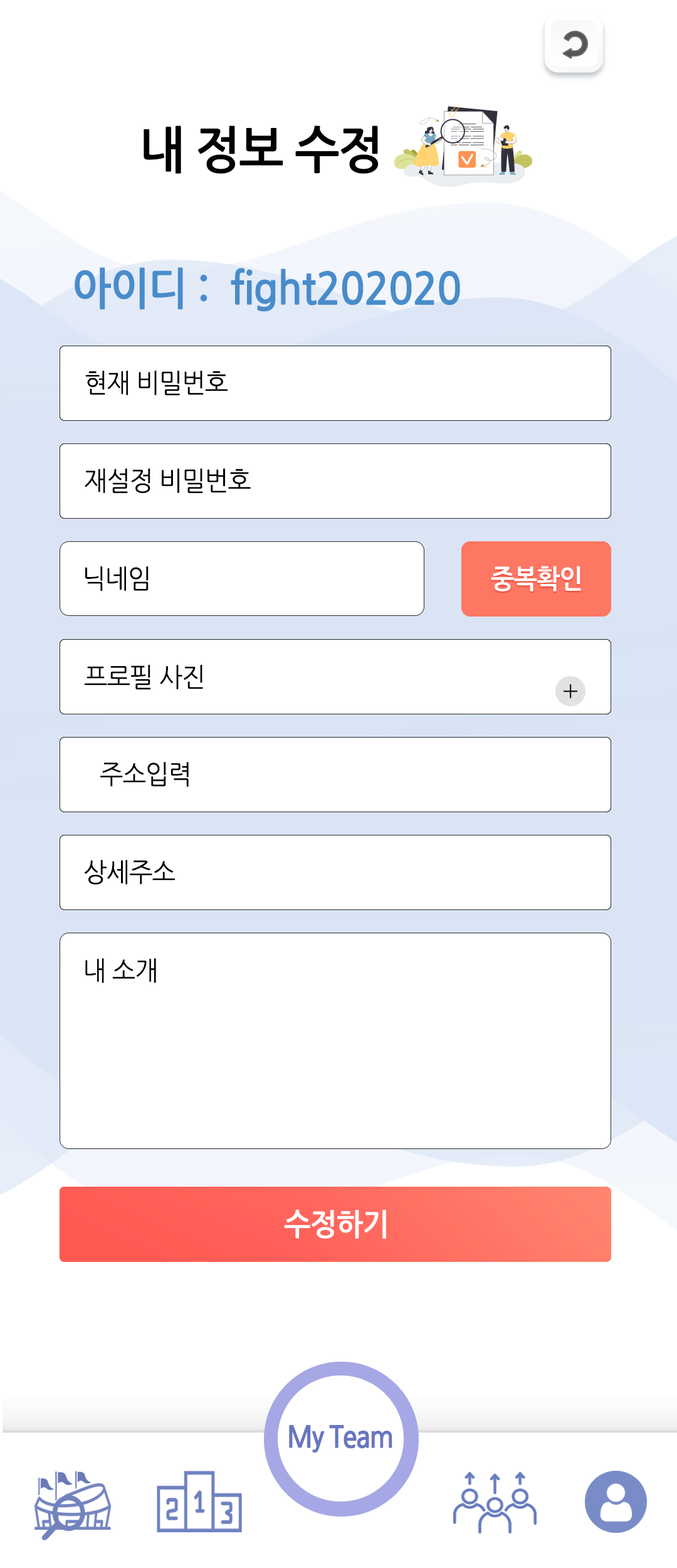
<style>
.page{position:relative;width:677px;height:1568px;background:#ffffff}
.page>*{position:absolute;margin:0}
.t1{font:50.2px "NanumGothicBold";letter-spacing:-0.025em;color:#000000;scale:0.95 1}
.t2{font:43.9px "NanumGothicBold";letter-spacing:-0.025em;color:#488ccb;scale:0.95 1}
.t3{font:26.3px "NanumGothic";letter-spacing:-0.025em;color:#000000;scale:0.95 1}
.t4{font:26.3px "NanumGothicBold";letter-spacing:-0.025em;color:#ffffff;scale:0.95 1}
.t5{font:30.1px "NanumGothicBold";letter-spacing:-0.025em;color:#ffffff;scale:0.95 1}
</style>
<div class="page">
<p class="t1" style="left:144px;top:125px;width:234px;height:49px">내 정보 수정</p>
<p class="t2" style="left:75px;top:267px;width:385px;height:45px">아이디 :  fight202020</p>
<p class="t3" style="left:85px;top:371px;width:143px;height:25px">현재 비밀번호</p>
<p class="t3" style="left:85px;top:469px;width:166px;height:25px">재설정 비밀번호</p>
<p class="t3" style="left:85px;top:566px;width:64px;height:25px">닉네임</p>
<p class="t4" style="left:491px;top:566px;width:90px;height:25px">중복확인</p>
<p class="t3" style="left:85px;top:665px;width:118px;height:25px">프로필 사진</p>
<p class="t3" style="left:100px;top:762px;width:89px;height:25px">주소입력</p>
<p class="t3" style="left:85px;top:860px;width:90px;height:25px">상세주소</p>
<p class="t3" style="left:85px;top:958px;width:71px;height:25px">내 소개</p>
<p class="t5" style="left:284px;top:1209px;width:102px;height:30px">수정하기</p>
</div>
